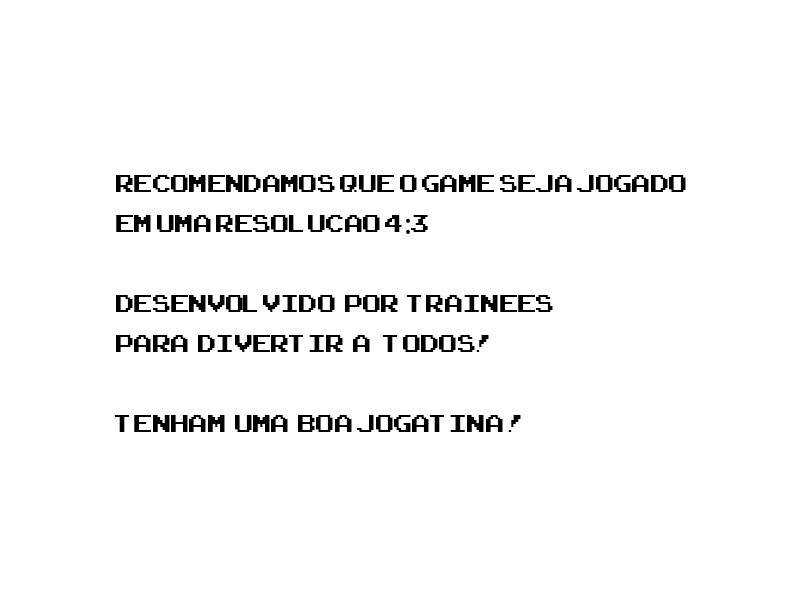
<style>
.page{position:relative;width:800px;height:600px;background:#ffffff}
.page>*{position:absolute;margin:0}
.t1{font:33.3px "ArcadeClassic";color:#000000}
.t2{font:33.3px "MyriadPro-Regular";color:#000000}
</style>
<div class="page">
<p class="t1" style="left:114px;top:175px;width:572px;height:257px">Recomendamos que o game seja jogado<br>em uma resolucao 4<span class="t2">:</span>3<br><br>Desenvolvido  por  trainees<br>para  divertir  a   todos!<br><br>tenham  uma  BOa JOGatina !</p>
</div>
